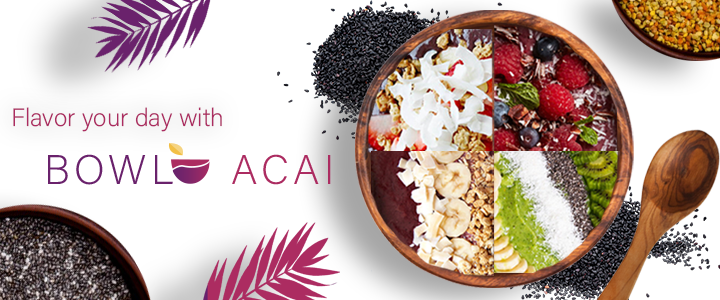
<style>
.page{position:relative;width:720px;height:300px;background:#ffffff}
.page>*{position:absolute;margin:0}
.t1{font:25px "AcuminConcept-ExtraLight";color:#ac2c61}
</style>
<div class="page">
<p class="t1" style="left:13px;top:107px;width:209px;height:25px">Flavor your day with</p>
</div>
